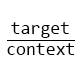
<style>
.page{position:relative;width:80px;height:80px;background:#ffffff}
.page>*{position:absolute;margin:0}
.t1{font:18px "Consolas";color:#000000}
</style>
<div class="page">
<p class="t1" style="left:11px;top:22px;width:58px;height:16px">target</p>
<p class="t1" style="left:7px;top:43px;width:68px;height:12px">context</p>
</div>
